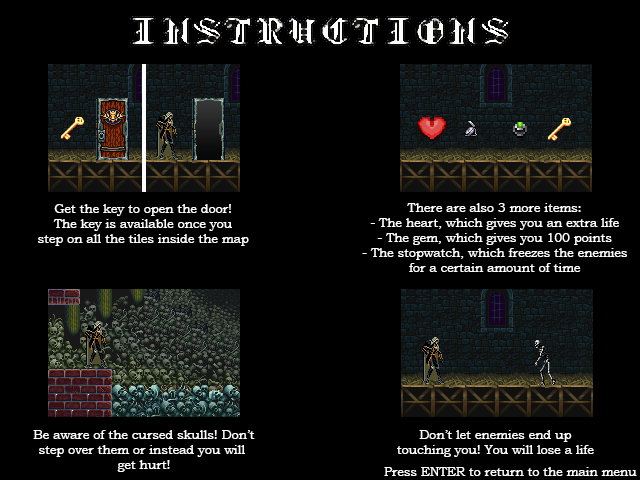
<style>
.page{position:relative;width:640px;height:480px;background:#000000}
.page>*{position:absolute;margin:0}
.t1{font:12.5px "BookmanOldStyle";color:#ffffff}
</style>
<div class="page">
<p class="t1" style="left:38px;top:204px;width:211px;height:42px;text-align:center">Get the key to open the door!<br>The key is available once you<br>step on all the tiles inside the map</p>
<p class="t1" style="left:362px;top:203px;width:265px;height:69px;text-align:center">There are also 3 more items:<br>- The heart, which gives you an extra life<br>- The gem, which gives you 100 points<br>- The stopwatch, which freezes the enemies<br>for a certain amount of time</p>
<p class="t1" style="left:33px;top:430px;width:222px;height:42px;text-align:center">Be aware of the cursed skulls! Don’t<br>step over them or instead you will <br>get hurt!</p>
<p class="t1" style="left:397px;top:430px;width:197px;height:27px;text-align:center">Don’t let enemies end up<br>touching you! You will lose a life</p>
<p class="t1" style="left:384px;top:467px;width:253px;height:9px">Press ENTER to return to the main menu</p>
</div>
